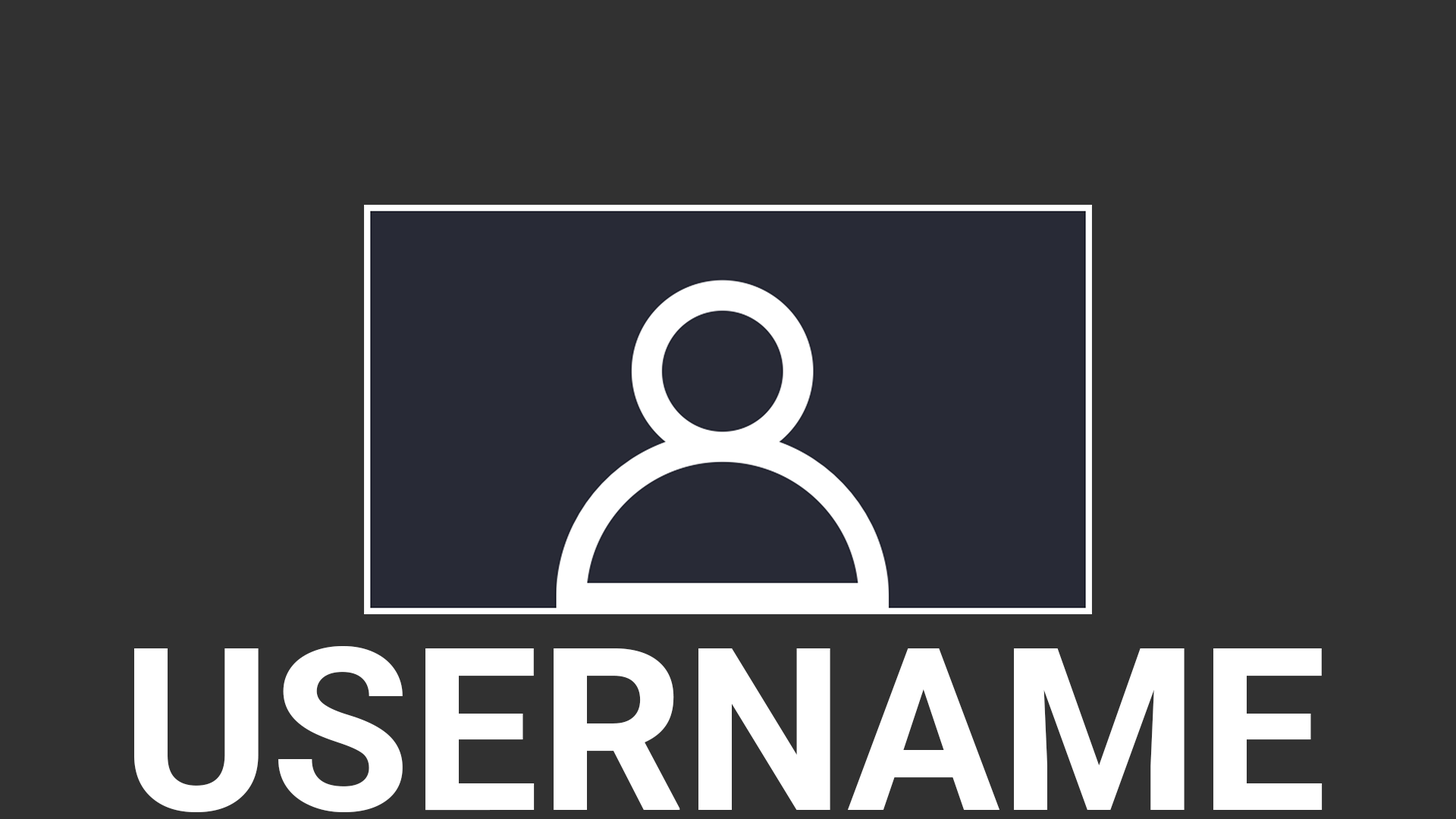
<style>
.page{position:relative;width:1456px;height:819px;background:#313131}
.page>*{position:absolute;margin:0}
.t1{font:227.5px "Roboto-Bold";color:#ffffff}
</style>
<div class="page">
<p class="t1" style="left:134px;top:646px;width:1189px;height:166px">USERNAME</p>
</div>
